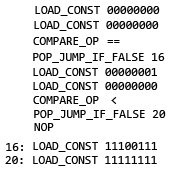
<style>
.page{position:relative;width:176px;height:174px;background:#ffffff}
.page>*{position:absolute;margin:0}
.t1{font:12px "Consolas";color:#000000}
</style>
<div class="page">
<p class="t1" style="left:35px;top:6px;width:125px;height:10px">LOAD_CONST 00000000</p>
<p class="t1" style="left:34px;top:21px;width:125px;height:10px">LOAD_CONST 00000000</p>
<p class="t1" style="left:33px;top:37px;width:66px;height:10px">COMPARE_OP</p>
<p class="t1" style="left:107px;top:40px;width:13px;height:3px">==</p>
<p class="t1" style="left:33px;top:53px;width:132px;height:10px">POP_JUMP_IF_FALSE 16</p>
<p class="t1" style="left:33px;top:68px;width:124px;height:10px">LOAD_CONST 00000001</p>
<p class="t1" style="left:33px;top:82px;width:125px;height:10px">LOAD_CONST 00000000</p>
<p class="t1" style="left:33px;top:96px;width:66px;height:10px">COMPARE_OP</p>
<p class="t1" style="left:111px;top:97px;width:6px;height:7px">&gt;</p>
<p class="t1" style="left:34px;top:110px;width:132px;height:10px">POP_JUMP_IF_FALSE 20</p>
<p class="t1" style="left:34px;top:123px;width:20px;height:8px">NOP</p>
<p class="t1" style="left:6px;top:143px;width:17px;height:8px">:16</p>
<p class="t1" style="left:33px;top:142px;width:124px;height:10px">LOAD_CONST 11100111</p>
<p class="t1" style="left:5px;top:156px;width:18px;height:8px">:20</p>
<p class="t1" style="left:33px;top:156px;width:124px;height:10px">LOAD_CONST 11111111</p>
</div>
